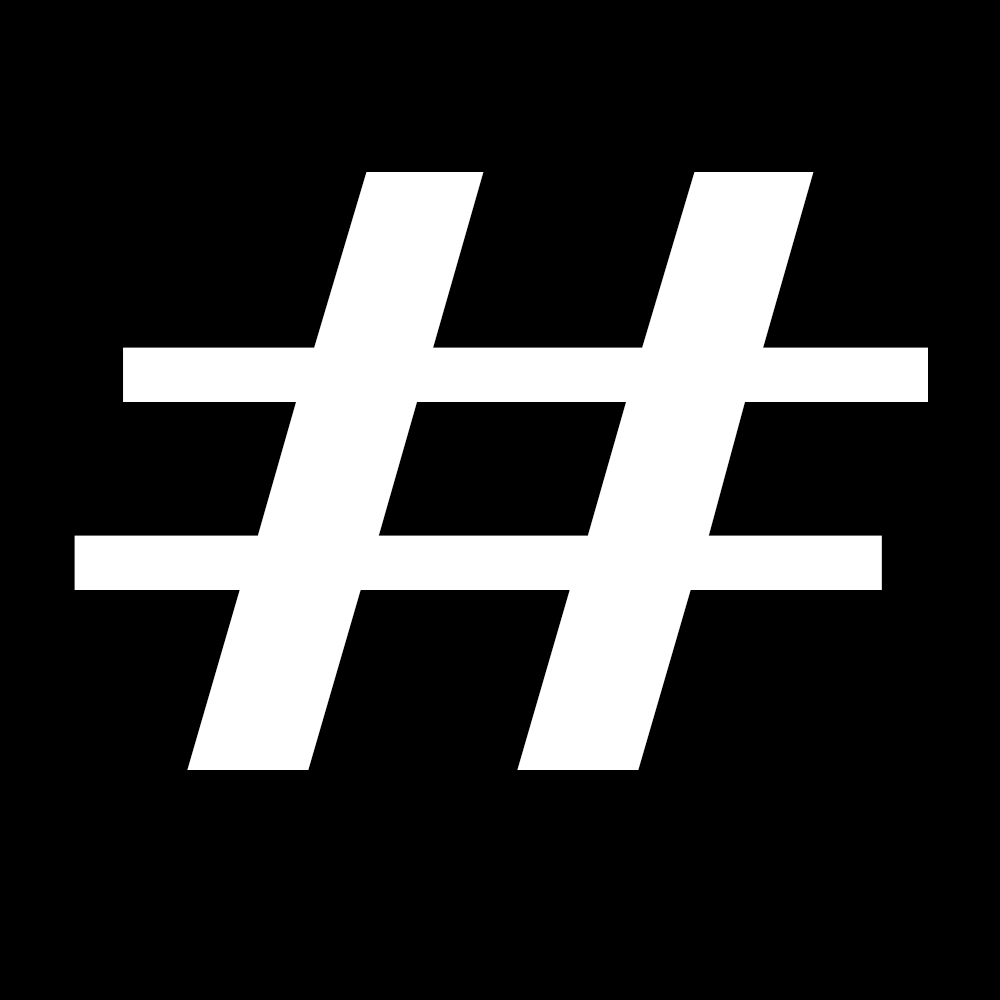
<style>
.page{position:relative;width:1000px;height:1000px;background:#000000}
.page>*{position:absolute;margin:0}
.t1{font:920px "MyriadPro-Regular";color:#ffffff;scale:2.19 1}
</style>
<div class="page">
<p class="t1" style="left:74px;top:172px;width:854px;height:598px">#</p>
</div>
